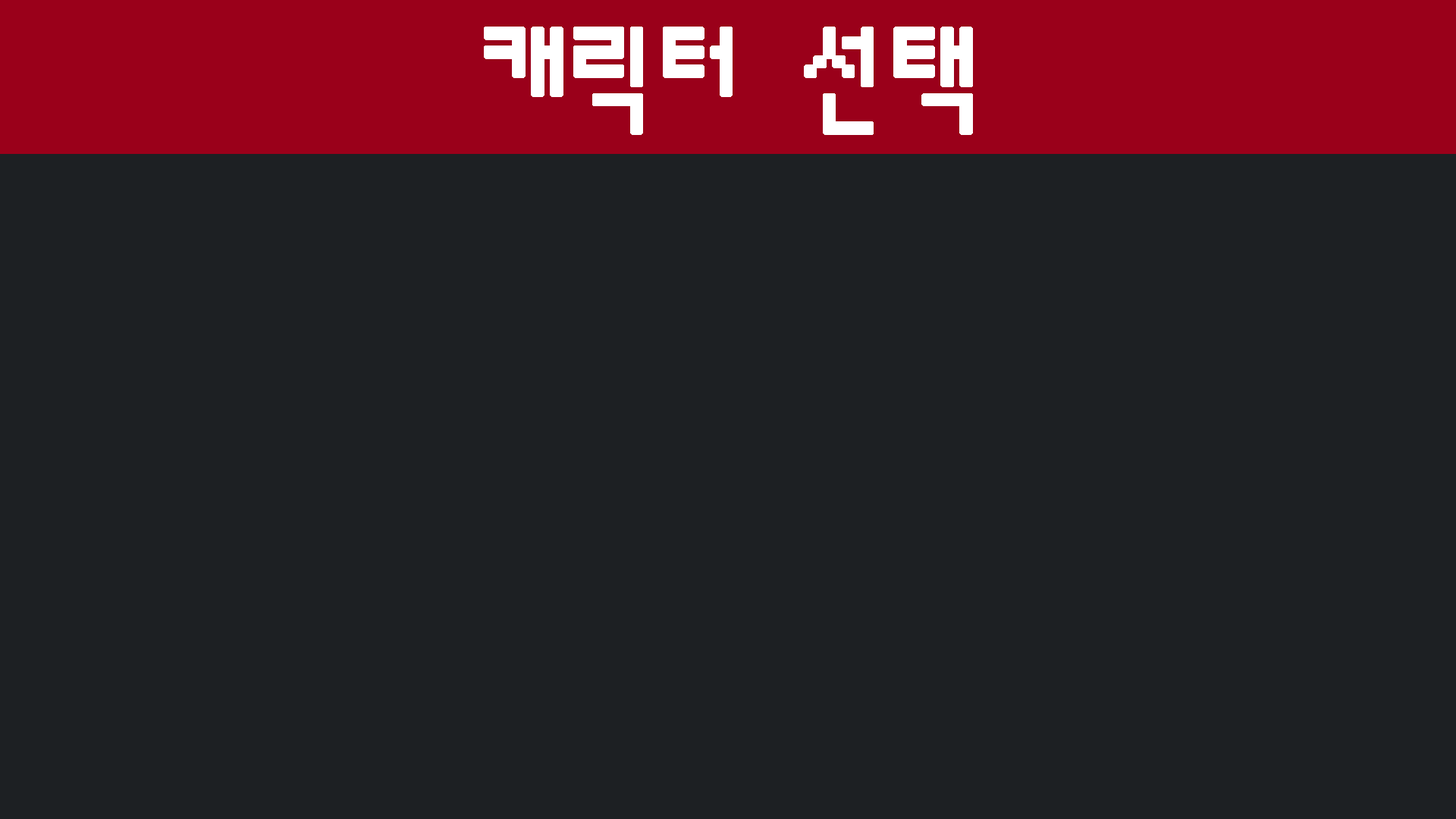
<style>
.page{position:relative;width:1456px;height:819px;background:#1d2023}
.page>*{position:absolute;margin:0}
.t1{font:113.7px "Á¤9";letter-spacing:0.01em;color:#ffffff;font-weight:bold}
</style>
<div class="page">
<p class="t1" style="left:484px;top:27px;width:489px;height:108px">캐릭터 선택</p>
</div>
